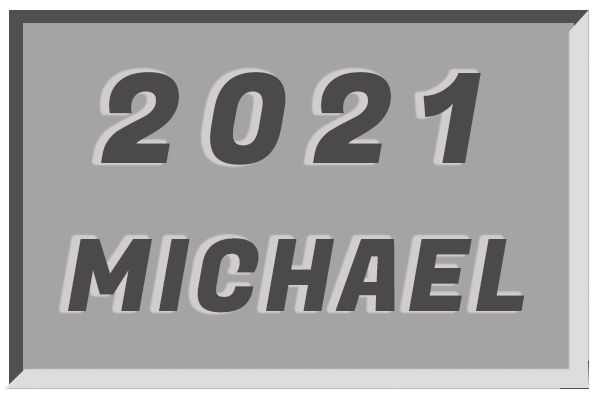
<style>
.page{position:relative;width:600px;height:400px;background:#a4a4a4}
.page>*{position:absolute;margin:0}
.t1{font:125px "FugazOne-Regular";letter-spacing:0.2em;color:#4c4949}
.t2{font:100px "FugazOne-Regular";letter-spacing:0.05em;color:#4c4949}
</style>
<div class="page">
<p class="t1" style="left:101px;top:72px;width:380px;height:93px">2021</p>
<p class="t2" style="left:68px;top:238px;width:457px;height:75px">MICHAEL</p>
</div>
